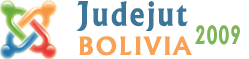
<style>
.page{position:relative;width:249px;height:59px;background:#ffffff}
.page>*{position:absolute;margin:0}
.t1{font:32.1px "Albertus-Bold";letter-spacing:0.075em;color:#3c779a;scale:0.94 1}
.t2{font:24px "Albertus-Bold";letter-spacing:0.075em;color:#7db559;scale:0.68 1}
.t3{font:24px "Albertus-Bold";letter-spacing:0.075em;color:#f7a255}
</style>
<div class="page">
<p class="t1" style="left:76px;top:1px;width:112px;height:30px">Judejut</p>
<p class="t2" style="left:195px;top:25px;width:45px;height:20px">2009</p>
<p class="t3" style="left:79px;top:36px;width:113px;height:20px">BOLIVIA</p>
</div>
